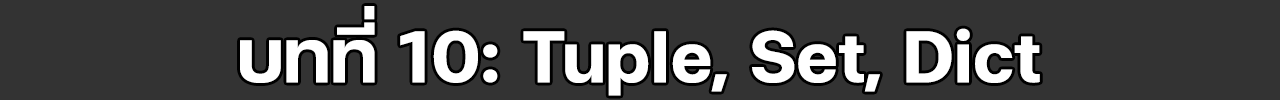
<style>
.page{position:relative;width:1280px;height:100px;background:#333333}
.page>*{position:absolute;margin:0}
.t1{font:100px "FCMinimalBold";color:#ffffff}
</style>
<div class="page">
<p class="t1" style="left:240px;top:6px;width:800px;height:90px">บทที่ 10: Tuple, Set, Dict</p>
</div>
